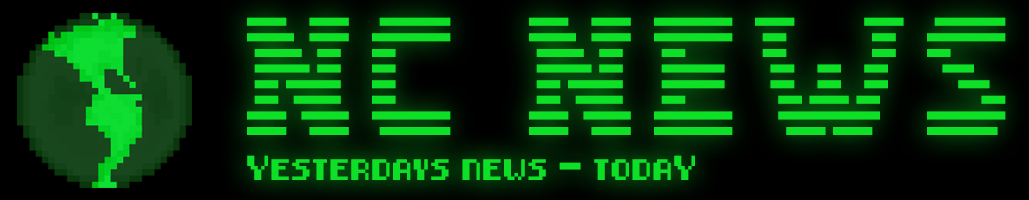
<style>
.page{position:relative;width:1029px;height:200px}
.page>*{position:absolute;margin:0}
.t1{font:125px "IBM-Logo";color:#0ee027}
.t2{font:20.8px "8-bit-pusab";color:#0ee027}
</style>
<div class="page">
<p class="t1" style="left:247px;top:17px;width:759px;height:118px">NC News</p>
<p class="t2" style="left:247px;top:155px;width:448px;height:25px">Yesterdays news - todaY</p>
</div>
